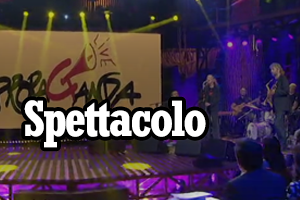
<style>
.page{position:relative;width:300px;height:200px}
.page>*{position:absolute;margin:0}
.t1{font:48px "RockwellNova-CondBold";letter-spacing:-0.05em;color:#ffffff}
</style>
<div class="page">
<p class="t1" style="left:24px;top:100px;width:182px;height:48px">Spettacolo</p>
</div>
